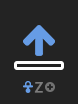
<style>
.page{position:relative;width:78px;height:104px;background:#232323}
.page>*{position:absolute;margin:0}
.t1{font:14px "SegoeUI";color:#7c7c7c;font-weight:bold}
</style>
<div class="page">
<p class="t1" style="left:34px;top:82px;width:9px;height:11px">Z</p>
</div>
